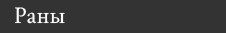
<style>
.page{position:relative;width:226px;height:33px;background:#333333}
.page>*{position:absolute;margin:0}
.t1{font:24px "CrimsonText-Regular";color:#ffffff}
</style>
<div class="page">
<p class="t1" style="left:15px;top:7px;width:50px;height:17px">Раны</p>
</div>
